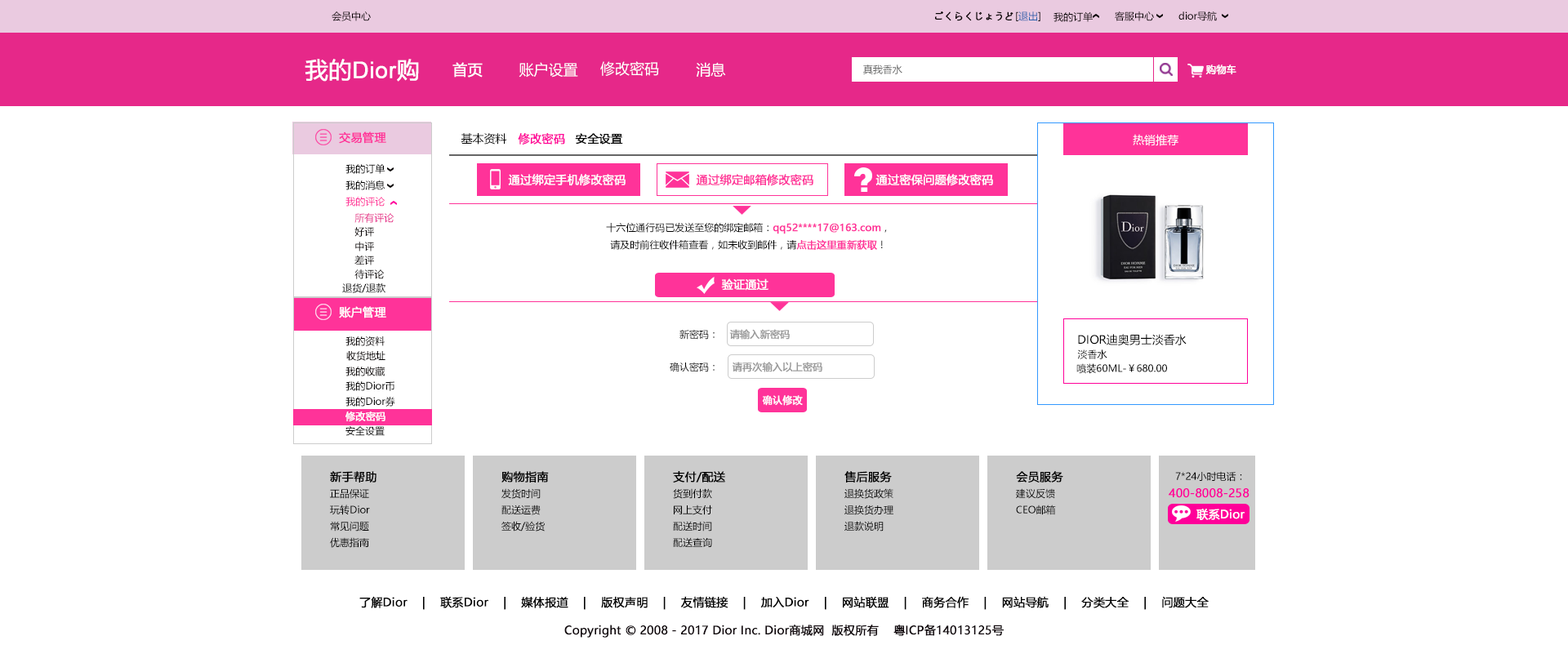
<style>
.page{position:relative;width:1568px;height:645px;background:#ffffff}
.page>*{position:absolute;margin:0}
.t1{font:9.8px "MicrosoftYaHei";color:#040000}
.t2{font:9.8px "MicrosoftYaHei";color:#040000;font-weight:bold}
.t3{font:9.8px "MicrosoftYaHei";color:#2a62ae}
.t4{font:22.9px "ArialMT";color:#ffffff;font-weight:bold}
.t5{font:22.9px "MicrosoftYaHei";color:#ffffff;font-weight:bold}
.t6{font:14.7px "MicrosoftYaHei";color:#ffffff;font-weight:bold}
.t7{font:14.7px "MicrosoftYaHei";color:#ffffff}
.t8{font:9.8px "MicrosoftYaHei";color:#666666}
.t9{font:9.8px "MicrosoftYaHei";color:#ffffff;font-weight:bold}
.t10{font:11.4px "MicrosoftYaHei";color:#ff3399;font-weight:bold}
.t11{font:11.4px "MicrosoftYaHei";color:#000000}
.t12{font:11.4px "MicrosoftYaHei";color:#ff0099;font-weight:bold}
.t13{font:11.4px "MicrosoftYaHei";color:#000000;font-weight:bold}
.t14{font:11.4px "MicrosoftYaHei";color:#ffffff}
.t15{font:9.8px "MicrosoftYaHei";color:#000000}
.t16{font:11.4px "MicrosoftYaHei";color:#ffffff;font-weight:bold}
.t17{font:9.8px "MicrosoftYaHei";color:#ff3399}
.t18{font:9.8px "MicrosoftYaHei";color:#e62889}
.t19{font:9.8px "MicrosoftYaHei";color:#ff3399;font-weight:bold}
.t20{font:9.8px "MicrosoftYaHei";color:#999999;font-weight:bold}
</style>
<div class="page">
<p class="t1" style="left:332px;top:11px;width:39px;height:10px">会员中心</p>
<p class="t2" style="left:935px;top:11px;width:78px;height:10px">ごくらくじょうど</p>
<p class="t3" style="left:1016px;top:11px;width:24px;height:10px"><span class="t1">[</span>退出<span class="t1">]</span></p>
<p class="t1" style="left:1054px;top:11px;width:39px;height:11px">我的订单</p>
<p class="t1" style="left:1115px;top:11px;width:39px;height:10px">客服中心</p>
<p class="t1" style="left:1178px;top:11px;width:39px;height:10px">dior导航</p>
<p class="t4" style="left:305px;top:59px;width:114px;height:23px"><span class="t5">我的</span>Dior<span class="t5">购</span></p>
<p class="t6" style="left:452px;top:62px;width:31px;height:16px">首页</p>
<p class="t7" style="left:519px;top:62px;width:59px;height:16px">账户设置</p>
<p class="t7" style="left:600px;top:61px;width:59px;height:15px">修改密码</p>
<p class="t7" style="left:696px;top:62px;width:30px;height:15px">消息</p>
<p class="t8" style="left:863px;top:65px;width:39px;height:9px">真我香水</p>
<p class="t9" style="left:1205px;top:65px;width:31px;height:10px">购物车</p>
<p class="t10" style="left:339px;top:131px;width:47px;height:13px">交易管理</p>
<p class="t11" style="left:461px;top:133px;width:46px;height:12px">基本资料</p>
<p class="t12" style="left:518px;top:133px;width:47px;height:12px">修改密码</p>
<p class="t13" style="left:575px;top:133px;width:48px;height:12px">安全设置</p>
<p class="t14" style="left:1133px;top:134px;width:45px;height:12px">热销推荐</p>
<p class="t15" style="left:345px;top:163px;width:40px;height:11px">我的订单</p>
<p class="t16" style="left:508px;top:174px;width:118px;height:12px">通过绑定手机修改密码</p>
<p class="t10" style="left:696px;top:174px;width:117px;height:12px">通过绑定邮箱修改密码</p>
<p class="t16" style="left:875px;top:174px;width:118px;height:12px">通过密保问题修改密码</p>
<p class="t15" style="left:345px;top:180px;width:40px;height:10px">我的消息</p>
<p class="t17" style="left:345px;top:197px;width:40px;height:10px">我的评论</p>
<p class="t18" style="left:354px;top:213px;width:40px;height:10px">所有评论</p>
<p class="t1" style="left:354px;top:227px;width:20px;height:10px">好评</p>
<p class="t15" style="left:606px;top:222px;width:281px;height:28px;text-align:center">十六位通行码已发送至您的绑定邮箱：<span class="t19">qq52****17@163.com</span>，<br>请及时前往收件箱查看，如未收到邮件，请<span class="t19">点击这里重新获取</span>！</p>
<p class="t1" style="left:355px;top:242px;width:19px;height:10px">中评</p>
<p class="t1" style="left:354px;top:255px;width:20px;height:10px">差评</p>
<p class="t1" style="left:354px;top:270px;width:31px;height:9px">待评论</p>
<p class="t16" style="left:721px;top:278px;width:47px;height:13px">验证通过</p>
<p class="t15" style="left:342px;top:283px;width:43px;height:10px">退货/退款</p>
<p class="t16" style="left:339px;top:306px;width:47px;height:12px">账户管理</p>
<p class="t15" style="left:679px;top:329px;width:36px;height:11px">新密码：</p>
<p class="t20" style="left:729px;top:329px;width:61px;height:11px">请输入新密码</p>
<p class="t1" style="left:345px;top:336px;width:40px;height:10px">我的资料</p>
<p class="t11" style="left:1078px;top:334px;width:109px;height:11px">DIOR迪奥男士淡香水</p>
<p class="t1" style="left:346px;top:351px;width:39px;height:10px">收货地址</p>
<p class="t15" style="left:1077px;top:350px;width:30px;height:9px">淡香水</p>
<p class="t15" style="left:670px;top:362px;width:45px;height:10px">确认密码：</p>
<p class="t20" style="left:732px;top:362px;width:90px;height:10px">请再次输入以上密码</p>
<p class="t15" style="left:1076px;top:363px;width:91px;height:11px">喷装60ML-￥680.00</p>
<p class="t1" style="left:345px;top:367px;width:40px;height:9px">我的收藏</p>
<p class="t15" style="left:345px;top:381px;width:49px;height:10px">我的Dior币</p>
<p class="t15" style="left:345px;top:397px;width:50px;height:10px">我的Dior券</p>
<p class="t9" style="left:762px;top:395px;width:41px;height:11px">确认修改</p>
<p class="t9" style="left:345px;top:412px;width:40px;height:9px">修改密码</p>
<p class="t15" style="left:345px;top:426px;width:40px;height:10px">安全设置</p>
<p class="t13" style="left:330px;top:471px;width:46px;height:12px">新手帮助</p>
<p class="t13" style="left:501px;top:471px;width:48px;height:12px">购物指南</p>
<p class="t13" style="left:673px;top:471px;width:52px;height:12px">支付/配送</p>
<p class="t13" style="left:844px;top:471px;width:48px;height:12px">售后服务</p>
<p class="t13" style="left:1016px;top:471px;width:47px;height:12px">会员服务</p>
<p class="t15" style="left:1175px;top:471px;width:67px;height:11px">7*24小时电话：</p>
<p class="t15" style="left:330px;top:489px;width:39px;height:10px">正品保证</p>
<p class="t15" style="left:501px;top:488px;width:40px;height:11px">发货时间</p>
<p class="t15" style="left:673px;top:488px;width:39px;height:11px">货到付款</p>
<p class="t15" style="left:844px;top:488px;width:49px;height:11px">退换货政策</p>
<p class="t15" style="left:1016px;top:488px;width:39px;height:11px">建议反馈</p>
<p class="t12" style="left:1169px;top:488px;width:81px;height:10px">400-8008-258</p>
<p class="t15" style="left:330px;top:505px;width:40px;height:10px">玩转Dior</p>
<p class="t15" style="left:501px;top:505px;width:40px;height:10px">配送运费</p>
<p class="t15" style="left:674px;top:505px;width:38px;height:10px">网上支付</p>
<p class="t15" style="left:844px;top:505px;width:49px;height:10px">退换货办理</p>
<p class="t15" style="left:1016px;top:505px;width:40px;height:10px">CEO邮箱</p>
<p class="t16" style="left:1196px;top:509px;width:49px;height:11px">联系Dior</p>
<p class="t15" style="left:330px;top:521px;width:39px;height:11px">常见问题</p>
<p class="t15" style="left:501px;top:521px;width:44px;height:11px">签收/验货</p>
<p class="t15" style="left:673px;top:521px;width:39px;height:11px">配送时间</p>
<p class="t15" style="left:844px;top:521px;width:40px;height:11px">退款说明</p>
<p class="t15" style="left:330px;top:537px;width:39px;height:11px">优惠指南</p>
<p class="t15" style="left:673px;top:537px;width:39px;height:10px">配送查询</p>
<p class="t13" style="left:359px;top:596px;width:850px;height:14px">了解Dior    |    联系Dior    |    媒体报道    |    版权声明    |    友情链接    |    加入Dior    |    网站联盟    |    商务合作    |    网站导航    |    分类大全    |    问题大全</p>
<p class="t13" style="left:564px;top:624px;width:440px;height:14px">Copyright © 2008 - 2017 Dior Inc. Dior商城网  版权所有    粤ICP备14013125号</p>
</div>
